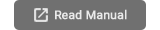
<style>
.page{position:relative;width:160px;height:30px;background:#707070}
.page>*{position:absolute;margin:0}
.t1{font:12px "Roboto-Regular";color:#eaeaea;font-weight:bold}
</style>
<div class="page">
<p class="t1" style="left:55px;top:9px;width:72px;height:11px">Read Manual</p>
</div>
